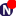
<style>
.page{position:relative;width:16px;height:16px;background:#ffffff}
.page>*{position:absolute;margin:0}
.t1{font:11.7px "Verdana";letter-spacing:0.05em;color:#ffffff;font-weight:bold;scale:1.03 1}
</style>
<div class="page">
<p class="t1" style="left:3px;top:5px;width:8px;height:10px">N</p>
</div>
